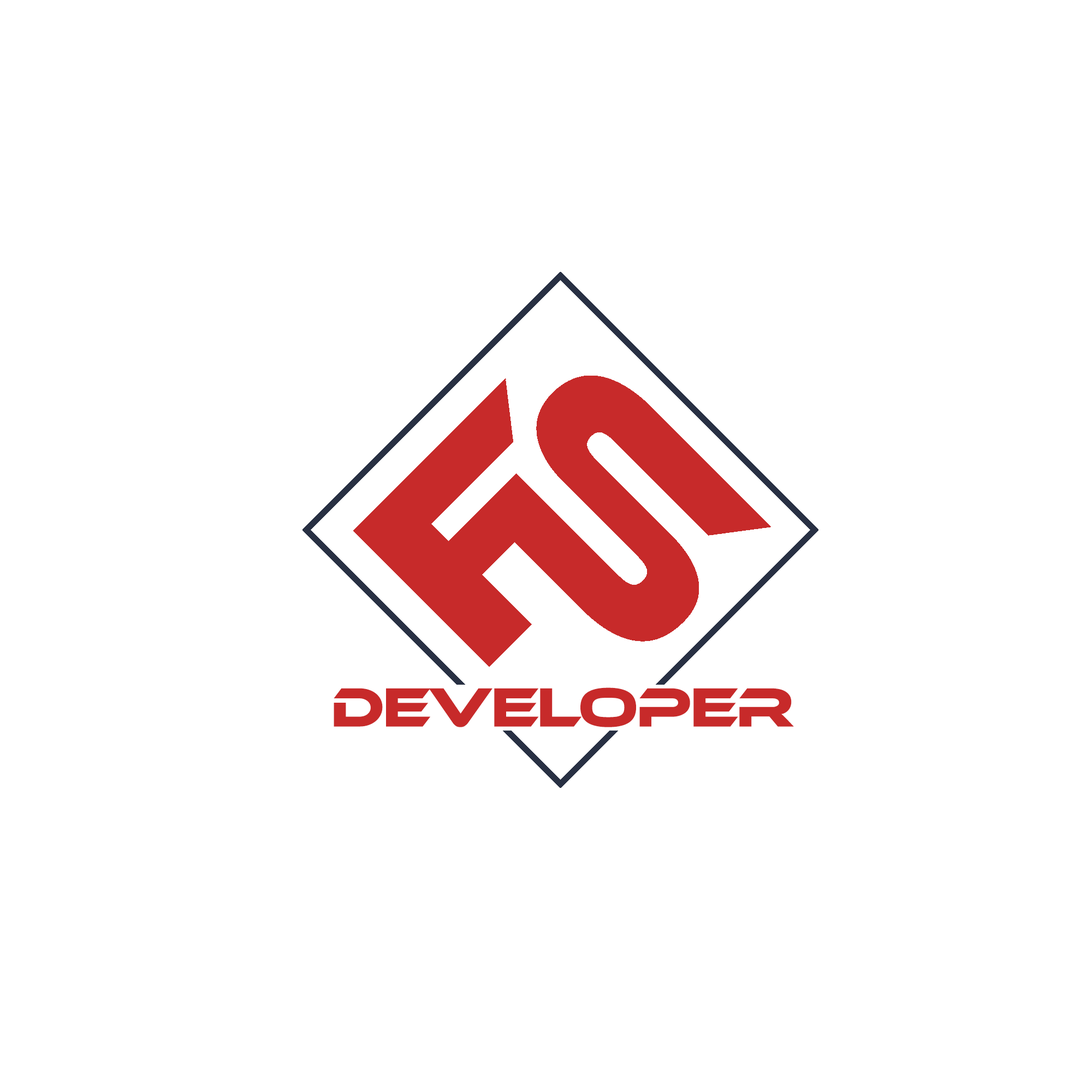
<style>
.page{position:relative;width:1092px;height:1092px;background:#ffffff}
.page>*{position:absolute;margin:0}
.t1{font:56.9px "EthnocentricRg-Regular";letter-spacing:-0.04em;color:#c72a2a}
</style>
<div class="page">
<p class="t1" style="left:334px;top:687px;width:460px;height:40px">developer</p>
</div>
